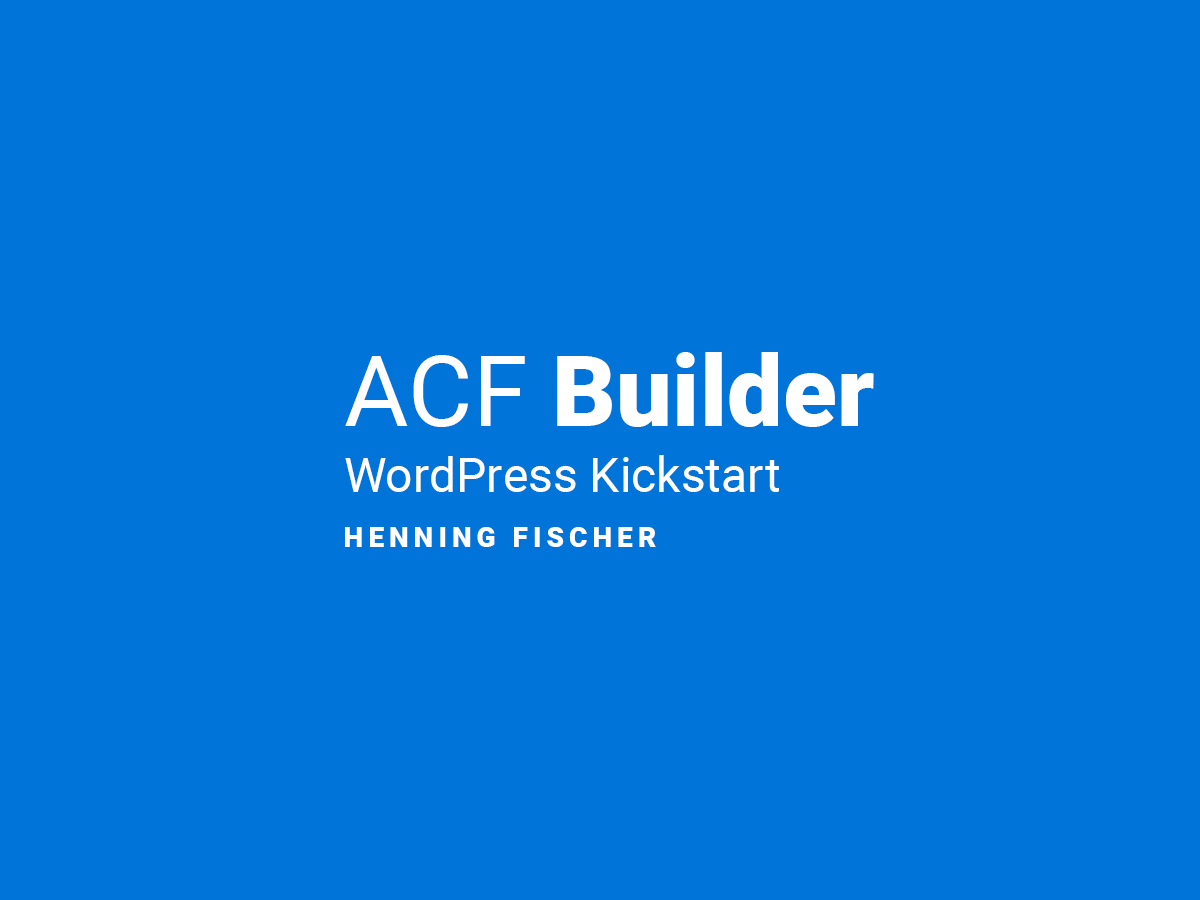
<style>
.page{position:relative;width:1200px;height:900px;background:#0074d9}
.page>*{position:absolute;margin:0}
.t1{font:99.3px "Roboto-Black";color:#ffffff}
.t2{font:99.3px "Roboto-Regular";color:#ffffff}
.t3{font:48px "Roboto-Regular";color:#ffffff}
.t4{font:28px "Roboto-Black";letter-spacing:0.18em;color:#ffffff}
</style>
<div class="page">
<p class="t1" style="left:345px;top:352px;width:529px;height:75px"><span class="t2">ACF </span>Builder</p>
<p class="t3" style="left:345px;top:455px;width:434px;height:37px">WordPress Kickstart</p>
<p class="t4" style="left:345px;top:527px;width:311px;height:20px">HENNING FISCHER</p>
</div>
